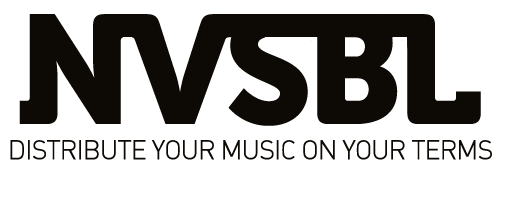
<style>
.page{position:relative;width:516px;height:200px;background:#ffffff}
.page>*{position:absolute;margin:0}
.t1{font:26.7px "DINLightAlternate";letter-spacing:-0.06em;color:#0d0905;font-weight:bold}
</style>
<div class="page">
<p class="t1" style="left:10px;top:140px;width:482px;height:20px">DISTRIBUTE YOUR MUSIC ON YOUR TERMS</p>
</div>
